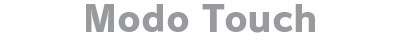
<style>
.page{position:relative;width:400px;height:40px;background:#ffffff}
.page>*{position:absolute;margin:0}
.t1{font:36px "RodinPro-EB";letter-spacing:0.003em;color:#989a9d}
</style>
<div class="page">
<p class="t1" style="left:86px;top:4px;width:229px;height:29px">Modo Touch</p>
</div>
